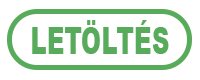
<style>
.page{position:relative;width:200px;height:80px;background:#ffffff}
.page>*{position:absolute;margin:0}
.t1{font:36.6px "Arial-Black";color:#57ab5a;scale:0.67 1}
</style>
<div class="page">
<p class="t1" style="left:32px;top:20px;width:137px;height:34px">LETÖLTÉS</p>
</div>
